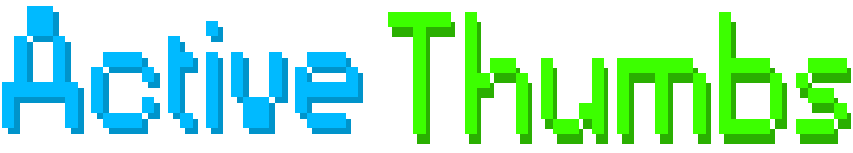
<style>
.page{position:relative;width:853px;height:153px;background:#ffffff}
.page>*{position:absolute;margin:0}
.t1{font:163px "Small Fonts";color:#00baff}
.t2{font:163px "Small Fonts"}
.t3{font:163px "Small Fonts";color:#3cff00}
</style>
<div class="page">
<p class="t1" style="left:2px;top:6px;width:356px;height:122px">Active</p>
<p class="t2" style="left:8px;top:12px;width:355px;height:122px">Active</p>
<p class="t3" style="left:388px;top:12px;width:459px;height:122px">Thumbs</p>
<p class="t2" style="left:392px;top:22px;width:459px;height:122px">Thumbs</p>
</div>
